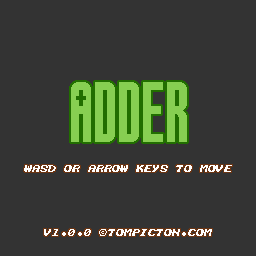
<style>
.page{position:relative;width:256px;height:256px;background:#333333}
.page>*{position:absolute;margin:0}
.t1{font:32px "InternationalFontofMystery";color:#ffffff}
.t2{font:32px "TheFontAgainstGiygas";color:#ffffff}
</style>
<div class="page">
<p class="t1" style="left:24px;top:165px;width:208px;height:7px">wasd or arrow keys to move</p>
<p class="t1" style="left:44px;top:229px;width:168px;height:7px">v1<span class="t2">.</span>0<span class="t2">.</span>0  tompicton<span class="t2">.</span>com</p>
</div>
